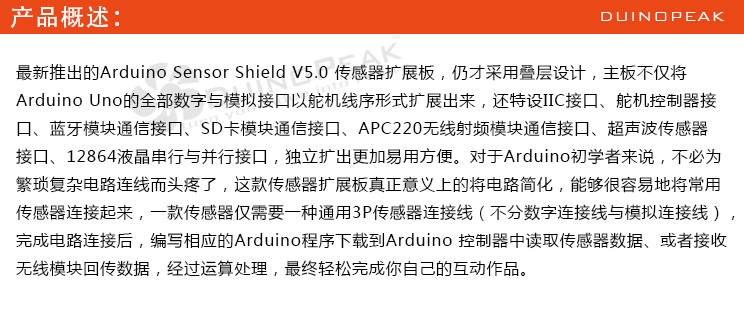
<style>
.page{position:relative;width:744px;height:312px;background:#ffffff}
.page>*{position:absolute;margin:0}
.t1{font:24px "AdobeHeitiStd-Regular";letter-spacing:0.05em;color:#ffffff}
.t2{font:18px "BankGothicBT-Light";letter-spacing:0.05em;color:#ffffff}
.t3{font:16px "MicrosoftYaHei";letter-spacing:0.05em;color:#000000}
</style>
<div class="page">
<p class="t1" style="left:10px;top:6px;width:109px;height:23px">产品概述：</p>
<p class="t2" style="left:601px;top:12px;width:124px;height:9px">DUINOPEAK</p>
<p class="t3" style="left:16px;top:64px;width:719px;height:213px">最新推出的Arduino Sensor Shield V5.0 传感器扩展板，仍才采用叠层设计，主板不仅将<br>Arduino Uno的全部数字与模拟接口以舵机线序形式扩展出来，还特设IIC接口、舵机控制器接<br>口、蓝牙模块通信接口、SD卡模块通信接口、APC220无线射频模块通信接口、超声波传感器<br>接口、12864液晶串行与并行接口，独立扩出更加易用方便。对于Arduino初学者来说，不必为<br>繁琐复杂电路连线而头疼了，这款传感器扩展板真正意义上的将电路简化，能够很容易地将常用<br>传感器连接起来，一款传感器仅需要一种通用3P传感器连接线（不分数字连接线与模拟连接线），<br>完成电路连接后，编写相应的Arduino程序下载到Arduino 控制器中读取传感器数据、或者接收<br>无线模块回传数据，经过运算处理，最终轻松完成你自己的互动作品。</p>
</div>
